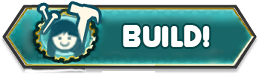
<style>
.page{position:relative;width:259px;height:75px;background:#ffffff}
.page>*{position:absolute;margin:0}
.t1{font:36px "Junegull";color:#ffffff}
</style>
<div class="page">
<p class="t1" style="left:123px;top:25px;width:87px;height:22px">BUILD!</p>
</div>
